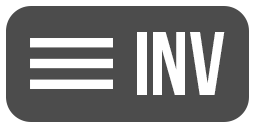
<style>
.page{position:relative;width:256px;height:128px;background:#4c4c4c}
.page>*{position:absolute;margin:0}
.t1{font:90px "BebasNeueBold";color:#ffffff}
</style>
<div class="page">
<p class="t1" style="left:137px;top:32px;width:88px;height:63px">inv</p>
</div>
